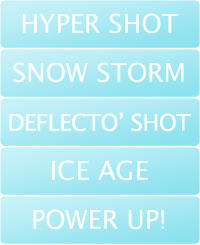
<style>
.page{position:relative;width:200px;height:245px}
.page>*{position:absolute;margin:0}
.t1{font:26px "LucidaGrande";color:#ffffff}
.t2{font:23px "LucidaGrande";letter-spacing:-0.025em;color:#ffffff}
</style>
<div class="page">
<p class="t1" style="left:22px;top:13px;width:156px;height:21px">HYPER SHOT</p>
<p class="t1" style="left:13px;top:62px;width:171px;height:21px">SNOW STORM</p>
<p class="t2" style="left:9px;top:112px;width:182px;height:20px">DEFLECTO’ SHOT</p>
<p class="t1" style="left:52px;top:160px;width:96px;height:21px">ICE AGE</p>
<p class="t1" style="left:33px;top:209px;width:131px;height:21px">POWER UP!</p>
</div>
